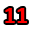
<style>
.page{position:relative;width:32px;height:32px;background:#ffffff}
.page>*{position:absolute;margin:0}
.t1{font:24px "Calibri-Bold";color:#ff0000}
</style>
<div class="page">
<p class="t1" style="left:5px;top:8px;width:22px;height:15px">11</p>
</div>
